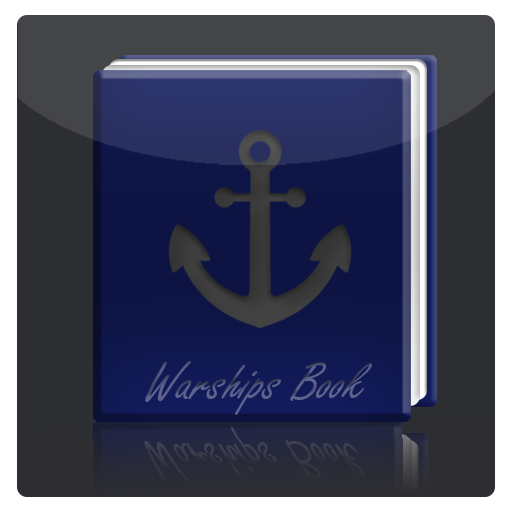
<style>
.page{position:relative;width:512px;height:512px}
.page>*{position:absolute;margin:0}
.t1{font:56.9px "FreestyleScript-Regular";color:#5d628f;font-style:italic}
</style>
<div class="page">
<p class="t1" style="left:145px;top:361px;width:227px;height:54px">Warships Book</p>
</div>
